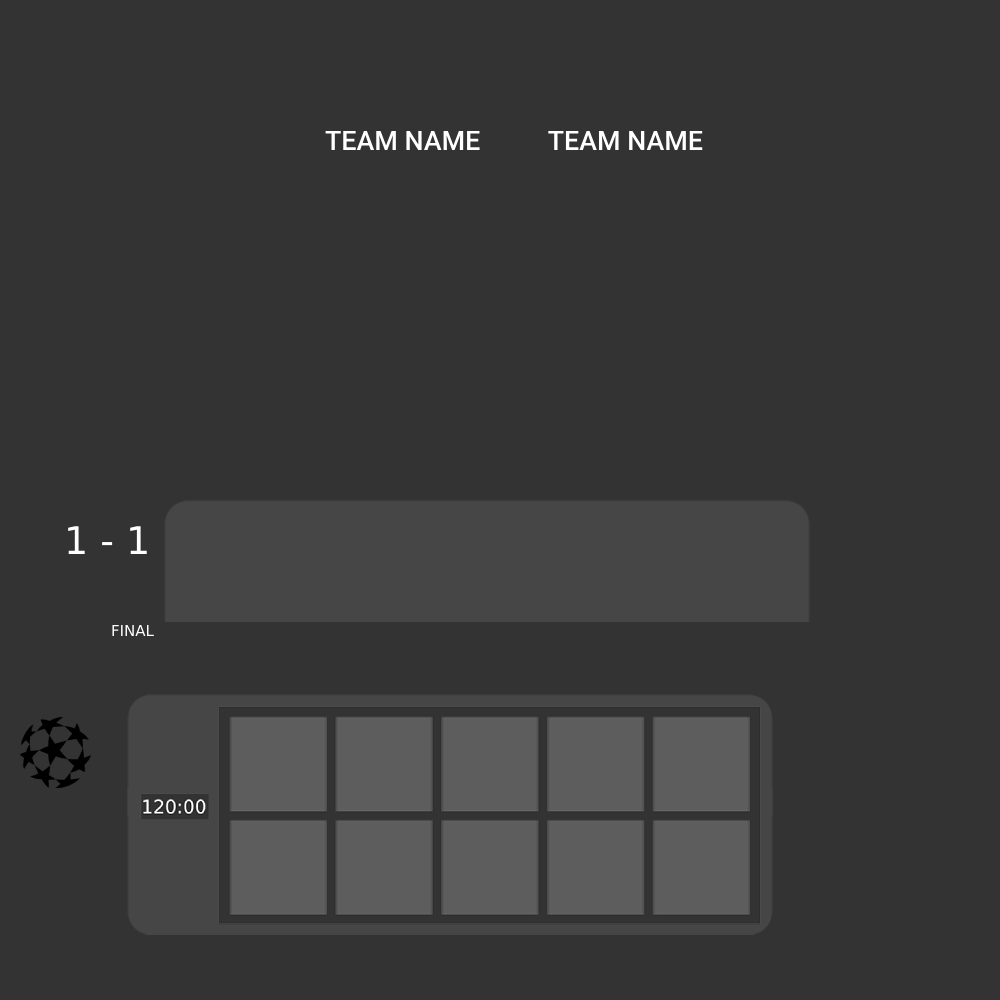
<style>
.page{position:relative;width:1000px;height:1000px;background:#333333}
.page>*{position:absolute;margin:0}
.t1{font:26.8px "Roboto-Medium";color:#ffffff}
.t2{font:38px "Bebas";color:#ffffff}
.t3{font:15px "Bebas";color:#ffffff}
</style>
<div class="page">
<p class="t1" style="left:325px;top:130px;width:155px;height:20px">TEAM NAME</p>
<p class="t1" style="left:548px;top:130px;width:155px;height:20px">TEAM NAME</p>
<p class="t2" style="left:68px;top:526px;width:79px;height:28px">1 - 1</p>
<p class="t3" style="left:112px;top:625px;width:42px;height:11px">FINAL</p>
</div>
